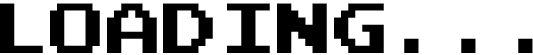
<style>
.page{position:relative;width:533px;height:55px;background:#ffffff}
.page>*{position:absolute;margin:0}
.t1{font:56.5px "PressStart2P";color:#000000}
</style>
<div class="page">
<p class="t1" style="left:0px;top:3px;width:533px;height:50px">LOADING...</p>
</div>
